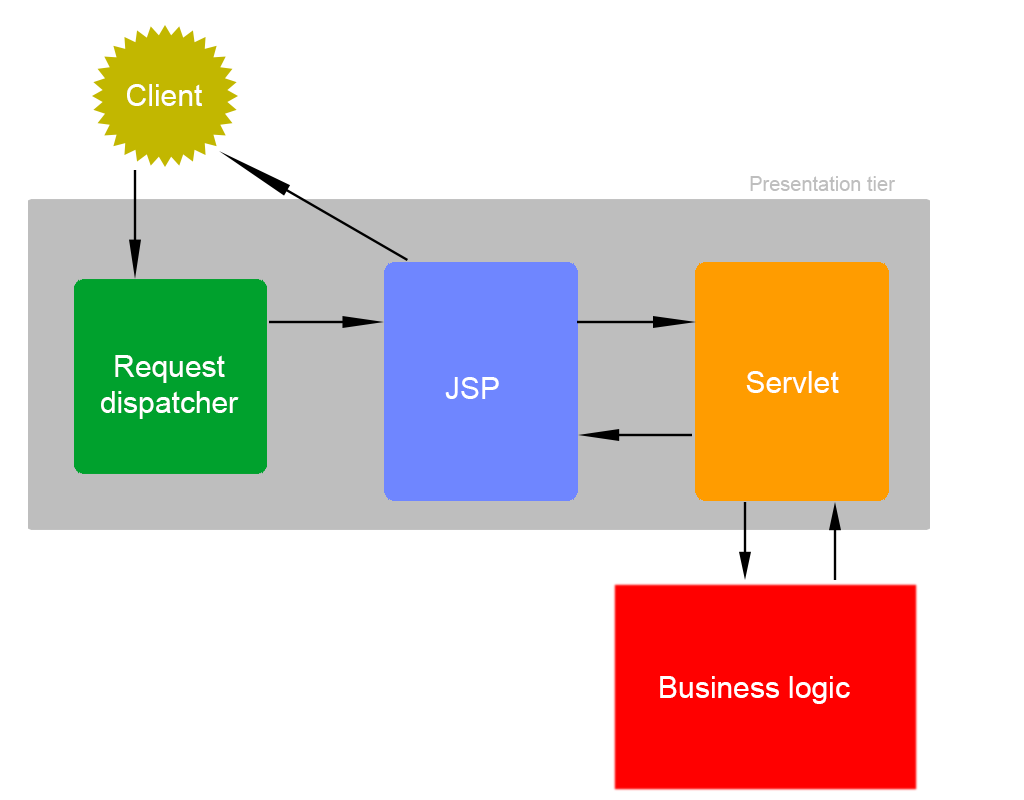
<style>
.page{position:relative;width:1024px;height:800px;background:#ffffff}
.page>*{position:absolute;margin:0}
.t1{font:30px "ArialMT";color:#ffffff}
.t2{font:20px "ArialMT";color:#bebebe}
</style>
<div class="page">
<p class="t1" style="left:127px;top:84px;width:75px;height:22px">Client</p>
<p class="t2" style="left:750px;top:176px;width:145px;height:15px">Presentation tier</p>
<p class="t1" style="left:101px;top:355px;width:138px;height:64px;text-align:center">Request<br>dispatcher</p>
<p class="t1" style="left:445px;top:377px;width:54px;height:22px">JSP</p>
<p class="t1" style="left:746px;top:371px;width:93px;height:22px">Servlet</p>
<p class="t1" style="left:660px;top:676px;width:190px;height:28px">Business logic</p>
</div>
